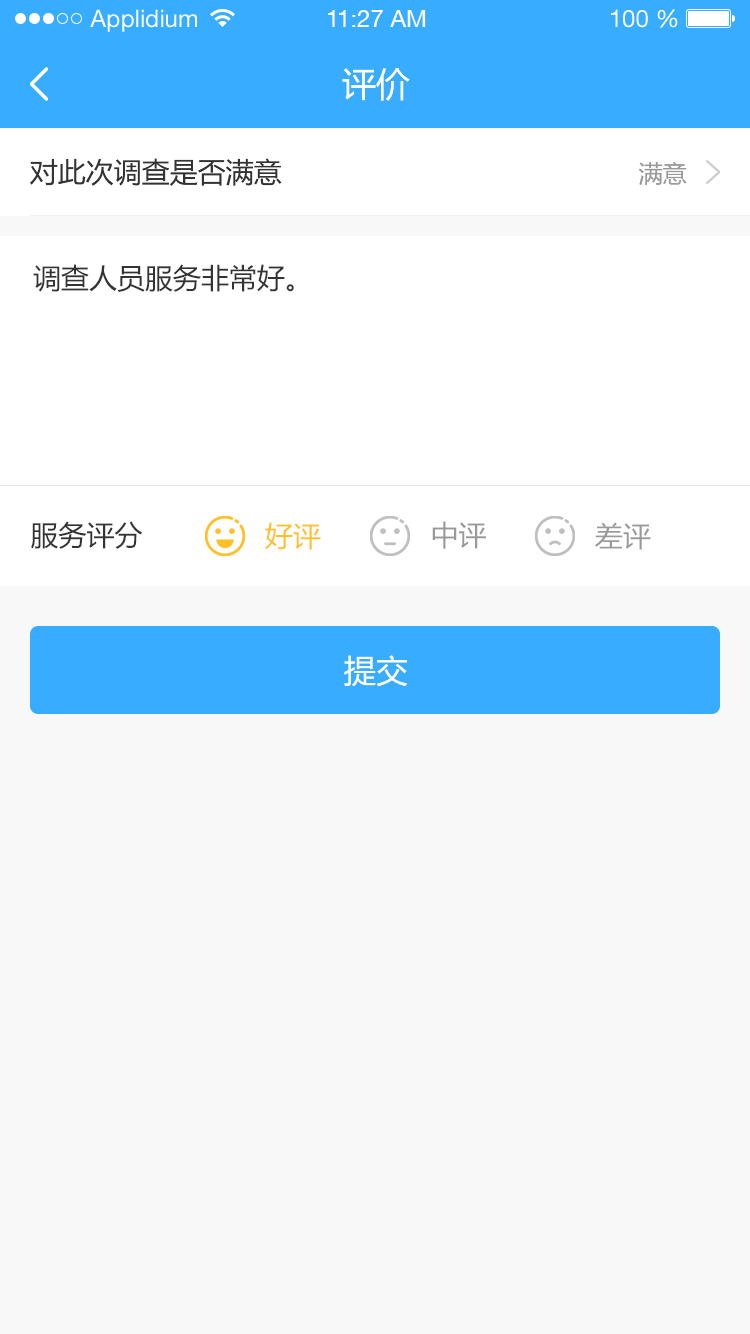
<style>
.page{position:relative;width:750px;height:1334px;background:#f8f8f8}
.page>*{position:absolute;margin:0}
.t1{font:24px "HelveticaNeueLTStd-Roman";color:#ffffff}
.t2{font:24px "HelveticaNeueCE-Roman";color:#ffffff}
.t3{font:34px "MicrosoftYaHei";color:#ffffff}
.t4{font:28px "MicrosoftYaHei";color:#333333}
.t5{font:24px "MicrosoftYaHei";color:#999999}
.t6{font:28px "MicrosoftYaHei";color:#999999}
.t7{font:28px "MicrosoftYaHei";color:#ffc027}
.t8{font:32px "MicrosoftYaHei";color:#ffffff}
</style>
<div class="page">
<p class="t1" style="left:90px;top:9px;width:107px;height:23px">Applidium</p>
<p class="t2" style="left:328px;top:10px;width:98px;height:17px">11:27 AM</p>
<p class="t1" style="left:611px;top:9px;width:67px;height:19px">100 %</p>
<p class="t3" style="left:342px;top:68px;width:68px;height:33px">评价</p>
<p class="t4" style="left:30px;top:158px;width:252px;height:28px">对此次调查是否满意</p>
<p class="t5" style="left:639px;top:161px;width:48px;height:24px">满意</p>
<p class="t4" style="left:33px;top:264px;width:261px;height:28px">调查人员服务非常好。</p>
<p class="t4" style="left:31px;top:521px;width:112px;height:28px">服务评分</p>
<p class="t6" style="left:432px;top:521px;width:54px;height:28px">中评</p>
<p class="t7" style="left:265px;top:522px;width:56px;height:28px">好评</p>
<p class="t6" style="left:595px;top:522px;width:56px;height:28px">差评</p>
<p class="t8" style="left:344px;top:655px;width:63px;height:32px">提交</p>
</div>
